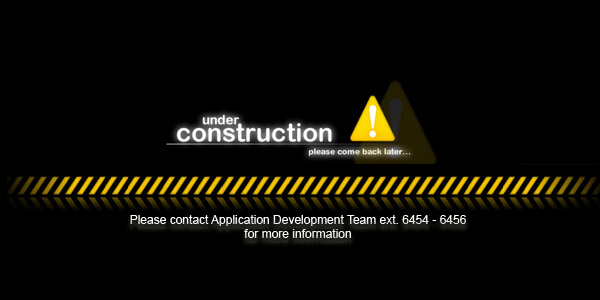
<style>
.page{position:relative;width:600px;height:300px;background:#000000}
.page>*{position:absolute;margin:0}
.t1{font:12px "ArialMT";color:#ffffff}
</style>
<div class="page">
<p class="t1" style="left:130px;top:215px;width:336px;height:23px;text-align:center">Please contact Application Development Team ext. 6454 - 6456<br>for more information</p>
</div>
